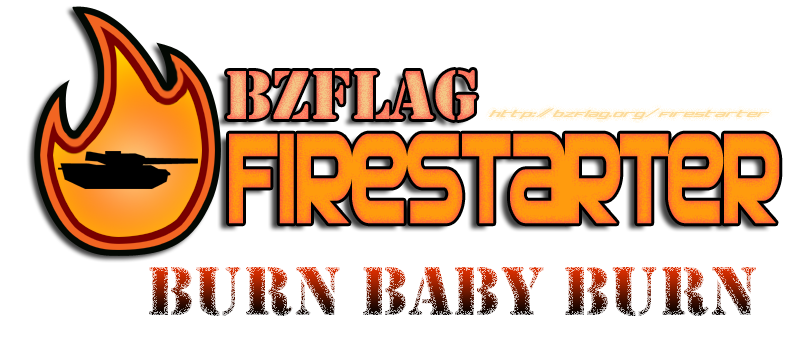
<style>
.page{position:relative;width:800px;height:348px;background:#ffffff}
.page>*{position:absolute;margin:0}
.t1{font:72px "Stencil"}
.t2{font:14px "Concielian";color:#fcdb9c}
.t3{font:133.9px "SFAutomaton";color:#ff9b0e;scale:0.62 1}
</style>
<div class="page">
<p class="t1" style="left:227px;top:70px;width:250px;height:50px">BZFlag</p>
<p class="t2" style="left:489px;top:108px;width:281px;height:11px">http://bzflag.org/firestarter</p>
<p class="t3" style="left:229px;top:133px;width:551px;height:91px">Firestarter</p>
<p class="t1" style="left:149px;top:267px;width:607px;height:49px">Burn Baby Burn</p>
</div>
